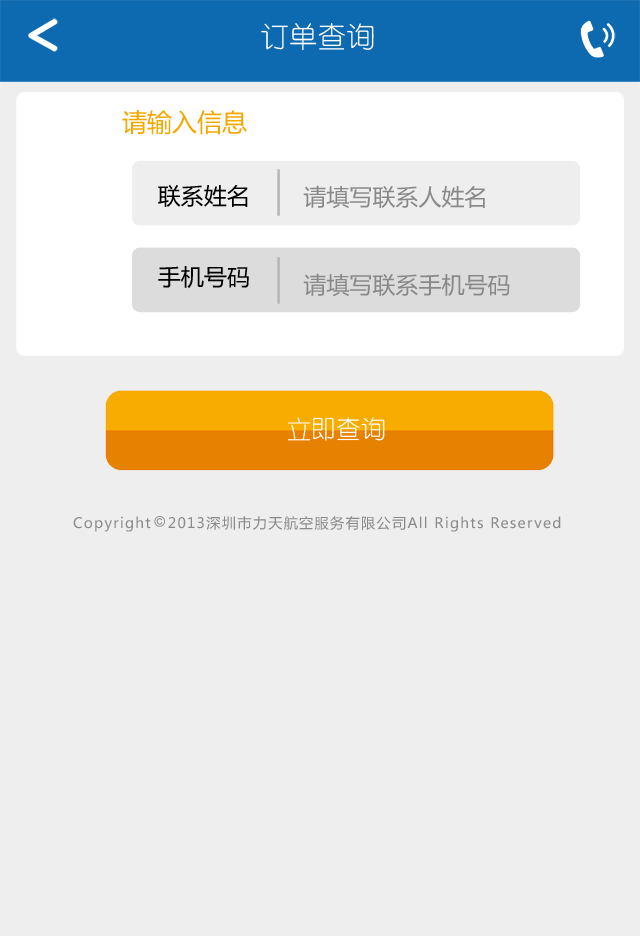
<style>
.page{position:relative;width:640px;height:936px;background:#eeeeee}
.page>*{position:absolute;margin:0}
.t1{font:28.8px "YouYuan";color:#ffffff}
.t2{font:25px "MicrosoftYaHei";color:#f5a700}
.t3{font:23px "MicrosoftYaHei";color:#000000}
.t4{font:23px "MicrosoftYaHei";color:#888888}
.t5{font:25px "YouYuan";color:#ffffff}
.t6{font:14.2px "MicrosoftYaHei";letter-spacing:0.09em;color:#898989}
</style>
<div class="page">
<p class="t1" style="left:261px;top:23px;width:113px;height:28px">订单查询</p>
<p class="t2" style="left:122px;top:110px;width:125px;height:25px">请输入信息</p>
<p class="t3" style="left:158px;top:185px;width:90px;height:22px">联系姓名</p>
<p class="t4" style="left:303px;top:185px;width:182px;height:24px">请填写联系人姓名</p>
<p class="t3" style="left:158px;top:266px;width:91px;height:23px">手机号码</p>
<p class="t4" style="left:303px;top:273px;width:207px;height:24px">请填写联系手机号码</p>
<p class="t5" style="left:288px;top:417px;width:97px;height:24px">立即查询</p>
<p class="t6" style="left:73px;top:516px;width:78px;height:16px">Copyright</p>
<p class="t6" style="left:168px;top:516px;width:393px;height:16px">2013深圳市力天航空服务有限公司All Rights Reserved</p>
</div>
